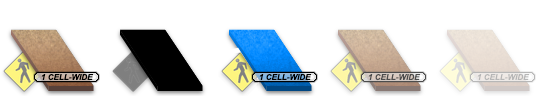
<style>
.page{position:relative;width:545px;height:100px;background:#ffffff}
.page>*{position:absolute;margin:0}
.t1{font:8.1px "Arial-BoldItalicMT";color:#000000}
.t2{font:8.1px "Arial-BoldItalicMT";color:#4c4c4c}
.t3{font:8.1px "Arial-BoldItalicMT";color:#b7b7b7}
</style>
<div class="page">
<p class="t1" style="left:41px;top:74px;width:53px;height:7px">1 CELL-WIDE</p>
<p class="t1" style="left:259px;top:74px;width:53px;height:7px">1 CELL-WIDE</p>
<p class="t2" style="left:368px;top:74px;width:53px;height:7px">1 CELL-WIDE</p>
<p class="t3" style="left:477px;top:74px;width:53px;height:7px">1 CELL-WIDE</p>
</div>
